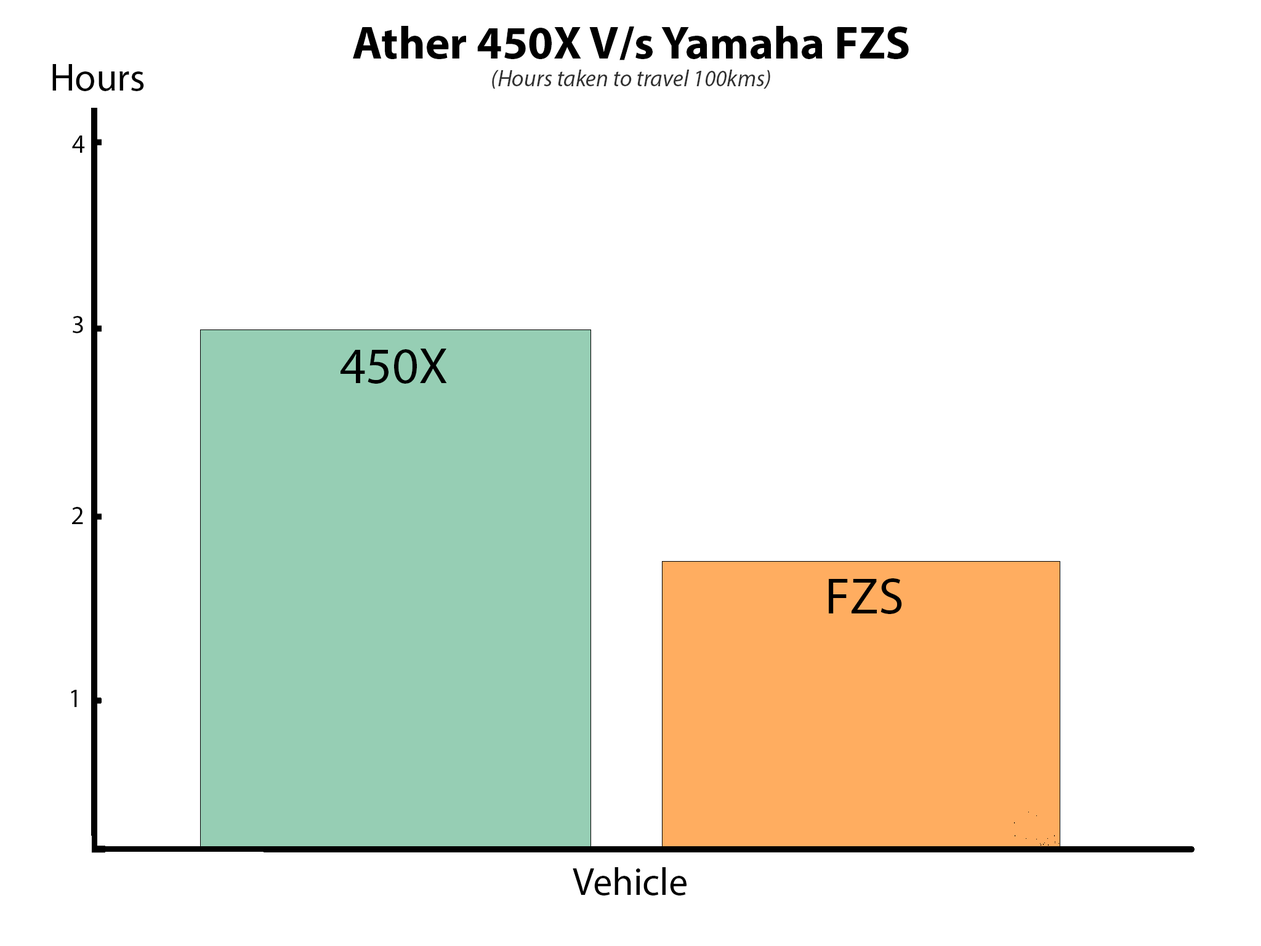
<style>
.page{position:relative;width:1261px;height:946px;background:#ffffff}
.page>*{position:absolute;margin:0}
.t1{font:23.1px "MyriadPro-It";color:#313131}
.t2{font:46.2px "MyriadPro-Bold";color:#000000}
.t3{font:38.5px "MyriadPro-Regular";color:#000000}
.t4{font:25.7px "MyriadPro-Regular";color:#000000}
.t5{font:51.3px "MyriadPro-Regular";color:#000000}
</style>
<div class="page">
<p class="t1" style="left:353px;top:26px;width:556px;height:63px;text-align:center"><span class="t2">Ather 450X V/s Yamaha FZS<br></span>(Hours taken to travel 100kms)</p>
<p class="t3" style="left:52px;top:64px;width:92px;height:27px">Hours</p>
<p class="t4" style="left:72px;top:135px;width:13px;height:18px">4</p>
<p class="t4" style="left:73px;top:316px;width:10px;height:17px">3</p>
<p class="t5" style="left:340px;top:348px;width:107px;height:36px">450X</p>
<p class="t4" style="left:72px;top:507px;width:11px;height:17px">2</p>
<p class="t5" style="left:829px;top:578px;width:73px;height:36px">FZS</p>
<p class="t4" style="left:71px;top:690px;width:6px;height:17px">1</p>
<p class="t3" style="left:573px;top:867px;width:113px;height:28px">Vehicle</p>
</div>
